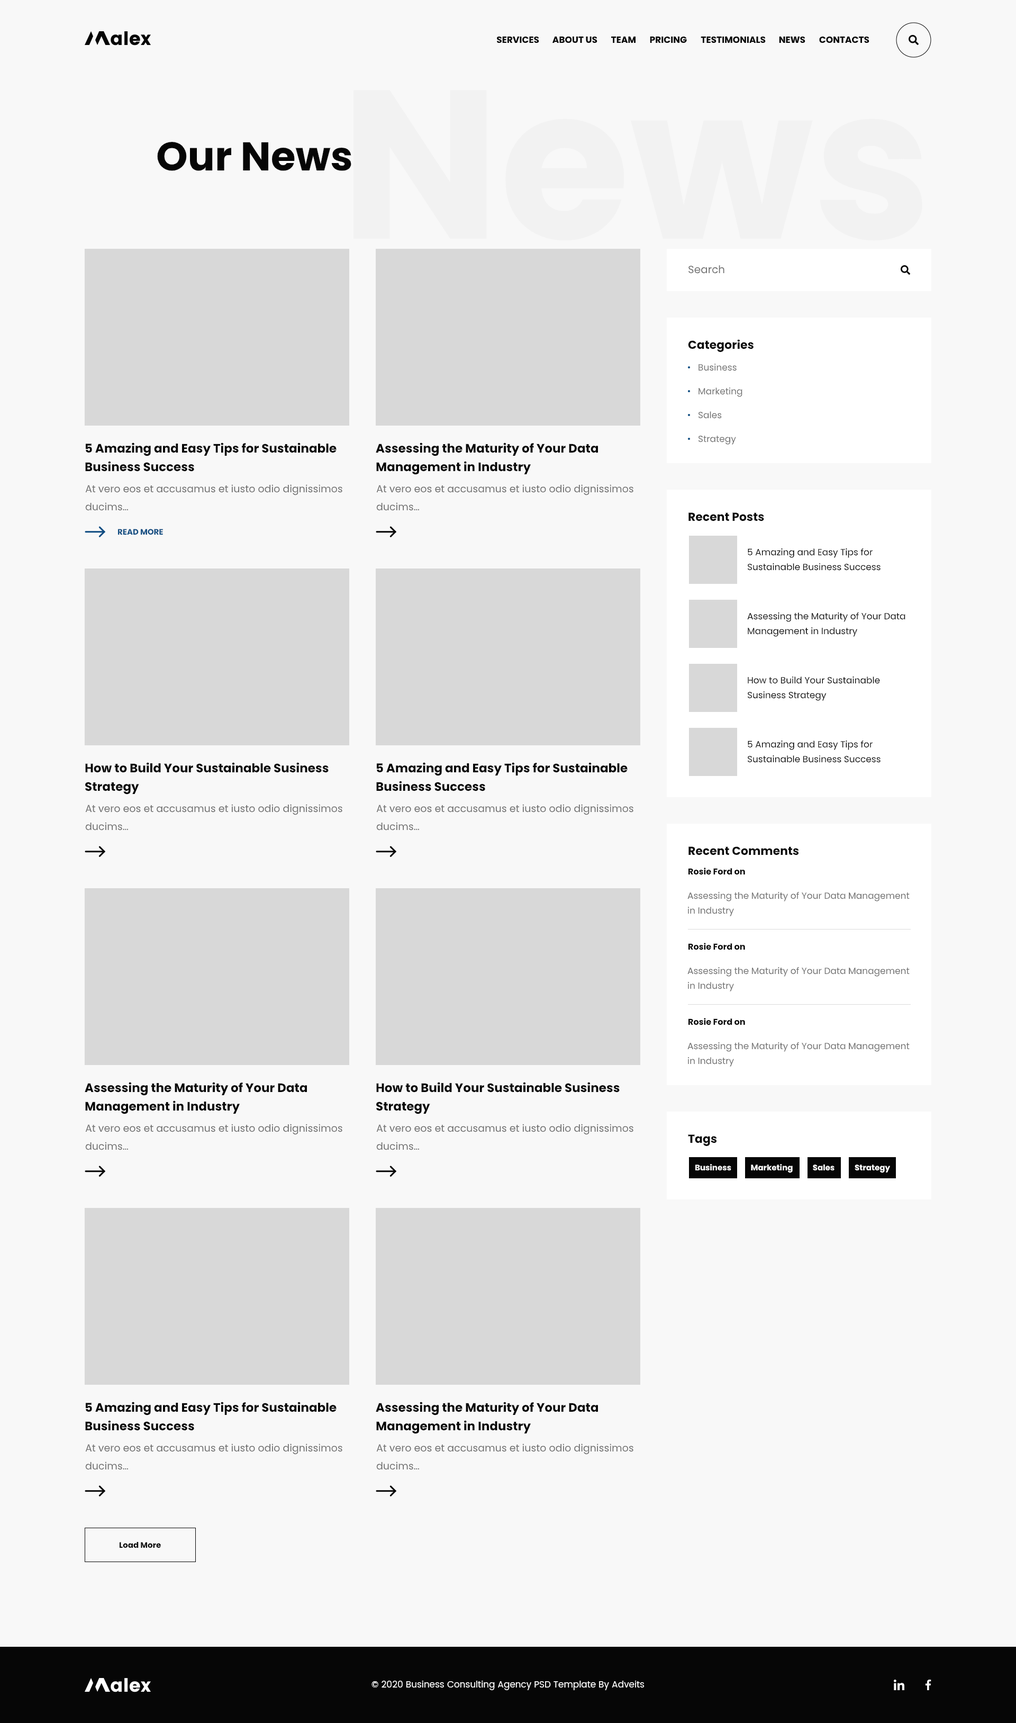
<style>
.page{position:relative;width:1016px;height:1723px;background:#f8f8f8}
.page>*{position:absolute;margin:0}
.t1{font:9px "Poppins-Bold";color:#060606}
.t2{font:211.8px "Poppins-Bold";color:#f2f2f2}
.t3{font:40.2px "Poppins-Bold";color:#060606}
.t4{font:10.6px "Poppins-Regular";color:#6c6c6c}
.t5{font:11.6px "Poppins-Bold";color:#060606}
.t6{font:9px "Poppins-Regular";color:#6c6c6c}
.t7{font:12.2px/18.5px "Poppins-Bold";color:#060606}
.t8{font:10.1px/18px "Poppins-Regular";color:#6c6c6c}
.t9{font:7.9px "Poppins-Bold";color:#0f4c81}
.t10{font:9px/14.8px "Poppins-Regular";color:#060606}
.t11{font:8.5px "Poppins-Bold";color:#060606}
.t12{font:9px/14.8px "Poppins-Regular";color:#6c6c6c}
.t13{font:7.9px "Poppins-Bold";color:#ffffff}
.t14{font:7.9px "Poppins-Bold";color:#060606}
.t15{font:9px "Poppins-Regular";color:#ffffff}
</style>
<div class="page">
<p class="t1" style="left:497px;top:36px;width:42px;height:7px">SERVICES</p>
<p class="t1" style="left:553px;top:37px;width:45px;height:6px">ABOUT US</p>
<p class="t1" style="left:611px;top:37px;width:25px;height:6px">TEAM</p>
<p class="t1" style="left:650px;top:37px;width:37px;height:6px">PRICING</p>
<p class="t1" style="left:701px;top:36px;width:65px;height:7px">TESTIMONIALS</p>
<p class="t1" style="left:779px;top:37px;width:27px;height:6px">NEWS</p>
<p class="t1" style="left:820px;top:37px;width:50px;height:6px">CONTACTS</p>
<p class="t2" style="left:353px;top:90px;width:570px;height:151px">News</p>
<p class="t3" style="left:157px;top:141px;width:195px;height:30px">Our News</p>
<p class="t4" style="left:689px;top:265px;width:36px;height:9px">Search</p>
<p class="t5" style="left:688px;top:339px;width:66px;height:14px">Categories</p>
<p class="t6" style="left:699px;top:364px;width:38px;height:7px">Business</p>
<p class="t6" style="left:699px;top:388px;width:44px;height:9px">Marketing</p>
<p class="t6" style="left:698px;top:411px;width:24px;height:8px">Sales</p>
<p class="t6" style="left:698px;top:435px;width:38px;height:10px">Strategy</p>
<p class="t7" style="left:85px;top:443px;width:252px;height:29px">5 Amazing and Easy Tips for Sustainable Business Success</p>
<p class="t7" style="left:376px;top:443px;width:223px;height:32px">Assessing the Maturity of Your Data Management in Industry</p>
<p class="t8" style="left:85px;top:484px;width:258px;height:27px">At vero eos et accusamus et iusto odio dignissimos ducims…</p>
<p class="t8" style="left:376px;top:484px;width:258px;height:27px">At vero eos et accusamus et iusto odio dignissimos ducims…</p>
<p class="t5" style="left:689px;top:512px;width:75px;height:9px">Recent Posts</p>
<p class="t9" style="left:118px;top:529px;width:45px;height:6px">READ MORE</p>
<p class="t10" style="left:748px;top:548px;width:133px;height:23px">5 Amazing and Easy Tips for Sustainable Business Success</p>
<p class="t10" style="left:748px;top:613px;width:158px;height:24px">Assessing the Maturity of Your Data Management in Industry</p>
<p class="t10" style="left:748px;top:677px;width:132px;height:24px">How to Build Your Sustainable Susiness Strategy</p>
<p class="t10" style="left:748px;top:741px;width:133px;height:22px">5 Amazing and Easy Tips for Sustainable Business Success</p>
<p class="t7" style="left:85px;top:762px;width:244px;height:33px">How to Build Your Sustainable Susiness Strategy</p>
<p class="t7" style="left:376px;top:762px;width:252px;height:29px">5 Amazing and Easy Tips for Sustainable Business Success</p>
<p class="t8" style="left:85px;top:804px;width:258px;height:27px">At vero eos et accusamus et iusto odio dignissimos ducims…</p>
<p class="t8" style="left:376px;top:804px;width:258px;height:27px">At vero eos et accusamus et iusto odio dignissimos ducims…</p>
<p class="t5" style="left:689px;top:847px;width:110px;height:9px">Recent Comments</p>
<p class="t11" style="left:688px;top:868px;width:57px;height:7px">Rosie Ford on</p>
<p class="t12" style="left:688px;top:892px;width:222px;height:24px">Assessing the Maturity of Your Data Management in Industry</p>
<p class="t11" style="left:688px;top:943px;width:57px;height:7px">Rosie Ford on</p>
<p class="t12" style="left:688px;top:967px;width:222px;height:25px">Assessing the Maturity of Your Data Management in Industry</p>
<p class="t11" style="left:688px;top:1018px;width:57px;height:7px">Rosie Ford on</p>
<p class="t12" style="left:688px;top:1042px;width:222px;height:25px">Assessing the Maturity of Your Data Management in Industry</p>
<p class="t7" style="left:85px;top:1082px;width:223px;height:32px">Assessing the Maturity of Your Data Management in Industry</p>
<p class="t7" style="left:376px;top:1082px;width:244px;height:32px">How to Build Your Sustainable Susiness Strategy</p>
<p class="t8" style="left:85px;top:1124px;width:258px;height:26px">At vero eos et accusamus et iusto odio dignissimos ducims…</p>
<p class="t8" style="left:376px;top:1124px;width:258px;height:26px">At vero eos et accusamus et iusto odio dignissimos ducims…</p>
<p class="t5" style="left:688px;top:1135px;width:29px;height:12px">Tags</p>
<p class="t13" style="left:695px;top:1164px;width:37px;height:7px">Business</p>
<p class="t13" style="left:751px;top:1164px;width:42px;height:9px">Marketing</p>
<p class="t13" style="left:813px;top:1164px;width:22px;height:7px">Sales</p>
<p class="t13" style="left:855px;top:1165px;width:35px;height:8px">Strategy</p>
<p class="t7" style="left:85px;top:1402px;width:252px;height:29px">5 Amazing and Easy Tips for Sustainable Business Success</p>
<p class="t7" style="left:376px;top:1402px;width:223px;height:32px">Assessing the Maturity of Your Data Management in Industry</p>
<p class="t8" style="left:85px;top:1444px;width:258px;height:26px">At vero eos et accusamus et iusto odio dignissimos ducims…</p>
<p class="t8" style="left:376px;top:1444px;width:258px;height:26px">At vero eos et accusamus et iusto odio dignissimos ducims…</p>
<p class="t14" style="left:119px;top:1542px;width:42px;height:7px">Load More</p>
<p class="t15" style="left:372px;top:1681px;width:273px;height:9px">© 2020 Business Consulting Agency PSD Template By Adveits</p>
</div>
